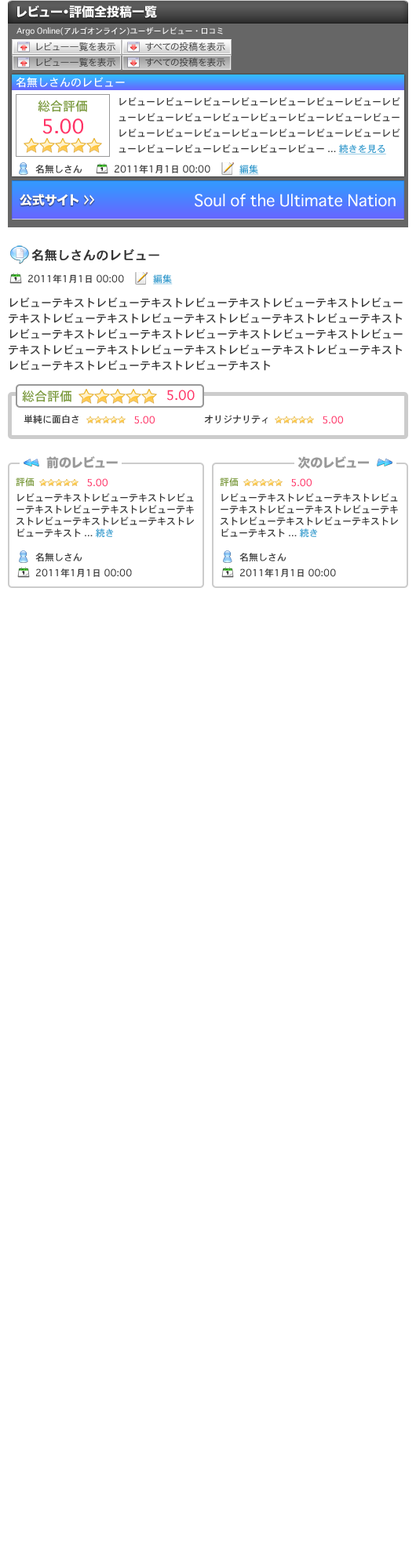
<style>
.page{position:relative;width:416px;height:1568px;background:#ffffff}
.page>*{position:absolute;margin:0}
.t1{font:12.5px "HiraKakuStd-W8";color:#ffffff}
.t2{font:7.8px "Osaka";color:#ffffff}
.t3{font:9.4px "HiraKakuPro-W3";color:#333333}
.t4{font:11px "Osaka";color:#ffffff}
.t5{font:12.5px "Osaka";color:#7a993d}
.t6{font:9.4px/15.7px "Osaka";color:#333333}
.t7{font:9.4px/15.7px "Osaka";color:#3399cc;text-decoration:underline}
.t8{font:18.8px "Osaka";color:#ff3366}
.t9{font:9.4px "Osaka";color:#333333}
.t10{font:9.4px "Osaka";color:#3399cc;text-decoration:underline}
.t11{font:12.5px "HiraKakuStd-W8";color:#fffefe}
.t12{font:12.5px "HiraKakuStd-W8";color:#fffefe;scale:0.5 1}
.t13{font:15.7px "Osaka";color:#ffffff}
.t14{font:12.5px "Osaka";color:#333333;font-weight:bold}
.t15{font:11px/15.7px "Osaka";color:#333333}
.t16{font:12.5px "Osaka";color:#ff3366}
.t17{font:9.4px "Osaka";color:#ff3366}
.t18{font:12.5px "HiraKakuStd-W8";color:#999999}
.t19{font:9.4px "Osaka";color:#7a993d}
.t20{font:9.4px/11.8px "Osaka";color:#333333}
.t21{font:9.4px/11.8px "Osaka";color:#3399cc}
</style>
<div class="page">
<p class="t1" style="left:16px;top:5px;width:141px;height:13px">レビュー・評価全投稿一覧</p>
<p class="t2" style="left:16px;top:27px;width:207px;height:9px">Argo Online(アルゴオンライン)ユーザーレビュー・口コミ</p>
<p class="t3" style="left:36px;top:42px;width:79px;height:9px">レビュー一覧を表示</p>
<p class="t3" style="left:145px;top:42px;width:80px;height:9px">すべての投稿を表示</p>
<p class="t3" style="left:36px;top:57px;width:79px;height:10px">レビュー一覧を表示</p>
<p class="t3" style="left:145px;top:57px;width:80px;height:10px">すべての投稿を表示</p>
<p class="t4" style="left:16px;top:77px;width:109px;height:11px">名無しさんのレビュー</p>
<p class="t5" style="left:38px;top:100px;width:49px;height:12px">総合評価</p>
<p class="t6" style="left:118px;top:97px;width:282px;height:57px">レビューレビューレビューレビューレビューレビューレビューレビューレビューレビューレビューレビューレビューレビューレビューレビューレビューレビューレビューレビューレビューレビューレビューレビューレビューレビューレビューレビュー ... <span class="t7">続きを見る</span></p>
<p class="t8" style="left:42px;top:118px;width:42px;height:16px">5.00</p>
<p class="t9" style="left:35px;top:165px;width:47px;height:9px">名無しさん</p>
<p class="t9" style="left:114px;top:165px;width:96px;height:9px">2011年1月1日 00:00</p>
<p class="t10" style="left:239px;top:165px;width:20px;height:10px">編集</p>
<p class="t11" style="left:20px;top:194px;width:75px;height:12px">公式サイト <span class="t12">＞＞</span></p>
<p class="t13" style="left:194px;top:194px;width:201px;height:13px">Soul of the Ultimate Nation</p>
<p class="t14" style="left:31px;top:249px;width:128px;height:12px">名無しさんのレビュー</p>
<p class="t9" style="left:28px;top:274px;width:96px;height:10px">2011年1月1日 00:00</p>
<p class="t10" style="left:153px;top:274px;width:19px;height:11px">編集</p>
<p class="t15" style="left:9px;top:297px;width:393px;height:74px">レビューテキストレビューテキストレビューテキストレビューテキストレビューテキストレビューテキストレビューテキストレビューテキストレビューテキストレビューテキストレビューテキストレビューテキストレビューテキストレビューテキストレビューテキストレビューテキストレビューテキストレビューテキストレビューテキストレビューテキストレビューテキスト</p>
<p class="t5" style="left:22px;top:390px;width:49px;height:12px">総合評価</p>
<p class="t16" style="left:167px;top:390px;width:27px;height:11px">5.00</p>
<p class="t9" style="left:24px;top:415px;width:54px;height:9px">単純に面白さ</p>
<p class="t17" style="left:134px;top:416px;width:20px;height:8px">5.00</p>
<p class="t9" style="left:204px;top:415px;width:63px;height:9px">オリジナリティ</p>
<p class="t17" style="left:322px;top:416px;width:21px;height:8px">5.00</p>
<p class="t18" style="left:46px;top:456px;width:72px;height:13px">前のレビュー</p>
<p class="t18" style="left:297px;top:456px;width:72px;height:13px">次のレビュー</p>
<p class="t19" style="left:16px;top:477px;width:18px;height:10px">評価</p>
<p class="t17" style="left:87px;top:478px;width:20px;height:9px">5.00</p>
<p class="t19" style="left:220px;top:477px;width:18px;height:10px">評価</p>
<p class="t17" style="left:291px;top:478px;width:20px;height:9px">5.00</p>
<p class="t20" style="left:16px;top:493px;width:178px;height:45px">レビューテキストレビューテキストレビューテキストレビューテキストレビューテキストレビューテキストレビューテキストレビューテキスト ... <span class="t21">続き</span></p>
<p class="t20" style="left:220px;top:493px;width:177px;height:45px">レビューテキストレビューテキストレビューテキストレビューテキストレビューテキストレビューテキストレビューテキストレビューテキスト ... <span class="t21">続き</span></p>
<p class="t9" style="left:35px;top:553px;width:47px;height:9px">名無しさん</p>
<p class="t9" style="left:239px;top:553px;width:47px;height:9px">名無しさん</p>
<p class="t9" style="left:36px;top:568px;width:96px;height:10px">2011年1月1日 00:00</p>
<p class="t9" style="left:240px;top:568px;width:96px;height:10px">2011年1月1日 00:00</p>
</div>
